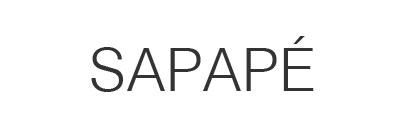
<style>
.page{position:relative;width:403px;height:129px;background:#ffffff}
.page>*{position:absolute;margin:0}
.t1{font:60px "HelvLight-Normal";color:#333333}
</style>
<div class="page">
<p class="t1" style="left:91px;top:36px;width:223px;height:56px">SAPAPÉ</p>
</div>
